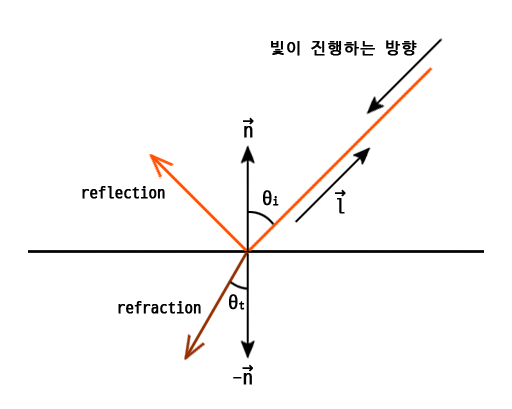
<style>
.page{position:relative;width:512px;height:409px;background:#ffffff}
.page>*{position:absolute;margin:0}
.t1{font:16px "D2Coding";color:#000000;font-weight:bold}
.t2{font:20px/10px "D2Coding";color:#000000;font-weight:bold}
.t3{font:20px "D2Coding";color:#000000;font-weight:bold}
.t4{font:12px "D2Coding";color:#000000;font-weight:bold}
.t5{font:20px/14px "D2Coding";color:#000000;font-weight:bold}
</style>
<div class="page">
<p class="t1" style="left:271px;top:40px;width:146px;height:16px">빛이 진행하는 방향</p>
<p class="t2" style="left:243px;top:117px;width:11px;height:21px">→ <br>n</p>
<p class="t1" style="left:82px;top:186px;width:83px;height:13px">reflection</p>
<p class="t3" style="left:263px;top:190px;width:16px;height:16px">θ<span class="t4">i</span></p>
<p class="t5" style="left:335px;top:189px;width:11px;height:25px">→ <br>l</p>
<p class="t3" style="left:229px;top:294px;width:16px;height:16px">θ<span class="t4">t</span></p>
<p class="t1" style="left:118px;top:301px;width:83px;height:13px">refraction</p>
<p class="t2" style="left:233px;top:364px;width:20px;height:21px">→ <br>-n</p>
</div>
